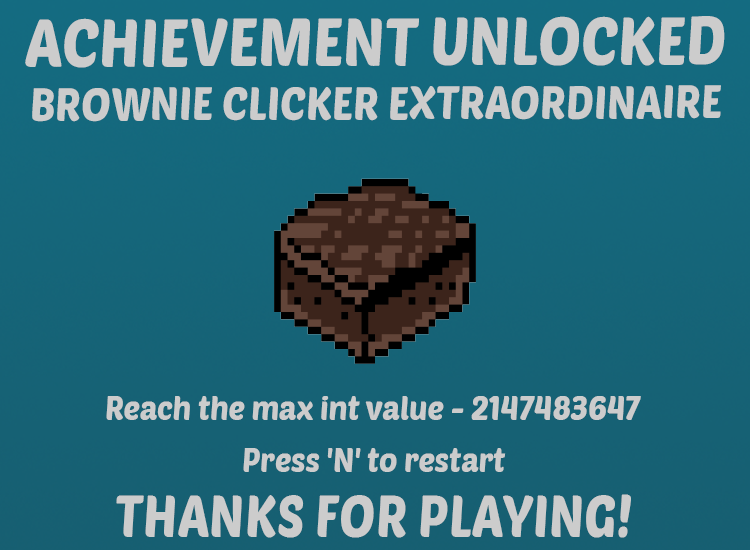
<style>
.page{position:relative;width:750px;height:550px}
.page>*{position:absolute;margin:0}
.t1{font:66.7px "PoetsenOne-Regular";color:#cccccc;scale:0.91 1}
.t2{font:46.2px "PoetsenOne-Regular";color:#cccccc;scale:0.91 1}
.t3{font:33.7px "PoetsenOne-Regular";color:#cccccc;scale:0.91 1}
.t4{font:56.6px "PoetsenOne-Regular";color:#cccccc;scale:0.91 1}
</style>
<div class="page">
<p class="t1" style="left:25px;top:16px;width:700px;height:52px">ACHIEVEMENT UNLOCKED</p>
<p class="t2" style="left:32px;top:85px;width:689px;height:37px">BROWNIE CLICKER EXTRAORDINAIRE</p>
<p class="t3" style="left:106px;top:396px;width:535px;height:24px">Reach the max int value - 2147483647</p>
<p class="t3" style="left:243px;top:448px;width:263px;height:24px">Press 'N' to restart</p>
<p class="t4" style="left:116px;top:494px;width:515px;height:44px">THANKS FOR PLAYING!</p>
</div>
